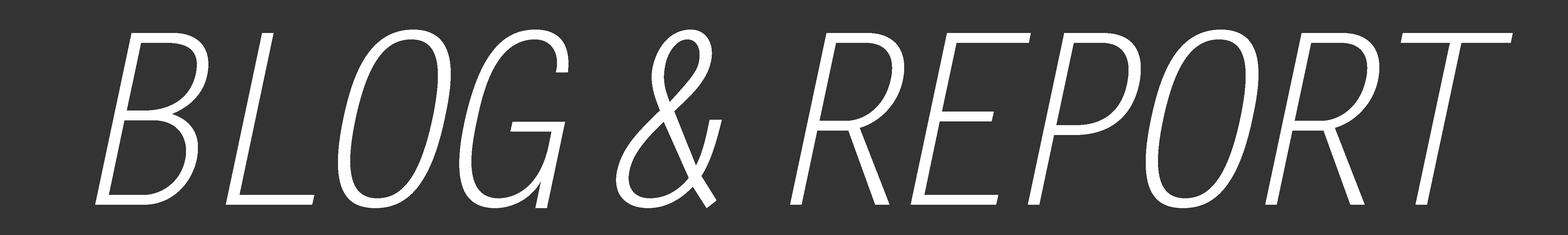
<style>
.page{position:relative;width:1568px;height:235px;background:#333333}
.page>*{position:absolute;margin:0}
.t1{font:237.6px "LetterGothicStd-Slanted";letter-spacing:-0.1em;color:#ffffff}
</style>
<div class="page">
<p class="t1" style="left:95px;top:30px;width:1418px;height:178px">BLOG &amp; REPORT</p>
</div>
